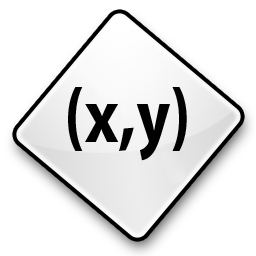
<style>
.page{position:relative;width:256px;height:256px;background:#ffffff}
.page>*{position:absolute;margin:0}
.t1{font:79.2px "MyriadPro-Bold";letter-spacing:0.005em;color:#010101;scale:0.82 1}
</style>
<div class="page">
<p class="t1" style="left:68px;top:87px;width:119px;height:74px">(x,y)</p>
</div>
